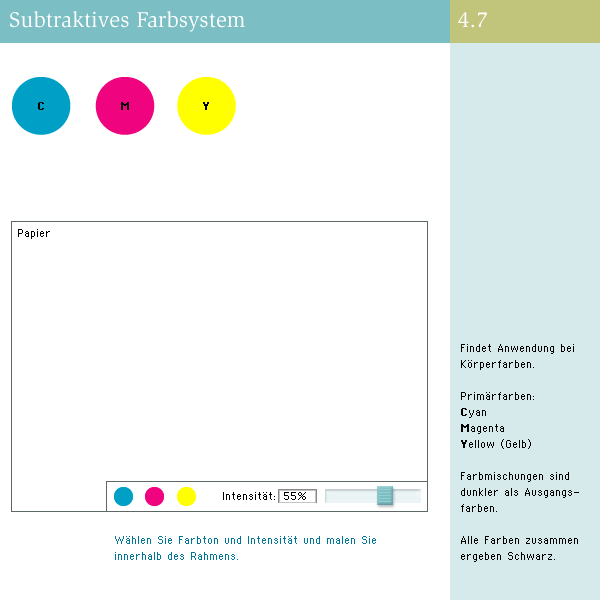
<style>
.page{position:relative;width:600px;height:600px;background:#ffffff}
.page>*{position:absolute;margin:0}
.t1{font:22px "Slimbach-Book";letter-spacing:0.01em;color:#ffffff}
.t2{font:22px "Slimbach-Book";color:#ffffff}
.t3{font:10px "Supertext02Bold";color:#000000}
.t4{font:10px "Supertext02";color:#000000}
.t5{font:10px/16px "Supertext02";color:#000000}
.t6{font:10px/16px "Supertext02Bold";color:#000000}
.t7{font:10px/16px "Supertext02";color:#007799}
</style>
<div class="page">
<p class="t1" style="left:10px;top:11px;width:235px;height:21px">Subtraktives Farbsystem</p>
<p class="t2" style="left:458px;top:12px;width:29px;height:16px">4.7</p>
<p class="t3" style="left:38px;top:102px;width:6px;height:8px">C</p>
<p class="t3" style="left:121px;top:102px;width:8px;height:8px">M</p>
<p class="t3" style="left:203px;top:102px;width:6px;height:8px">Y</p>
<p class="t4" style="left:18px;top:229px;width:32px;height:10px">Papier</p>
<p class="t5" style="left:461px;top:344px;width:118px;height:218px">Findet Anwendung bei <br>Körperfarben.<br><br>Primärfarben: <br><span class="t6">C</span>yan<br><span class="t6">M</span>agenta<br><span class="t6">Y</span>ellow (Gelb)<br><br>Farbmischungen sind <br>dunkler als Ausgangs-<br>farben.<br><br>Alle Farben zusammen <br>ergeben Schwarz.</p>
<p class="t4" style="left:223px;top:492px;width:52px;height:8px">Intensität:</p>
<p class="t4" style="left:284px;top:492px;width:22px;height:8px">55%</p>
<p class="t7" style="left:115px;top:536px;width:261px;height:24px">Wählen Sie Farbton und Intensität und malen Sie <br>innerhalb des Rahmens.</p>
</div>
